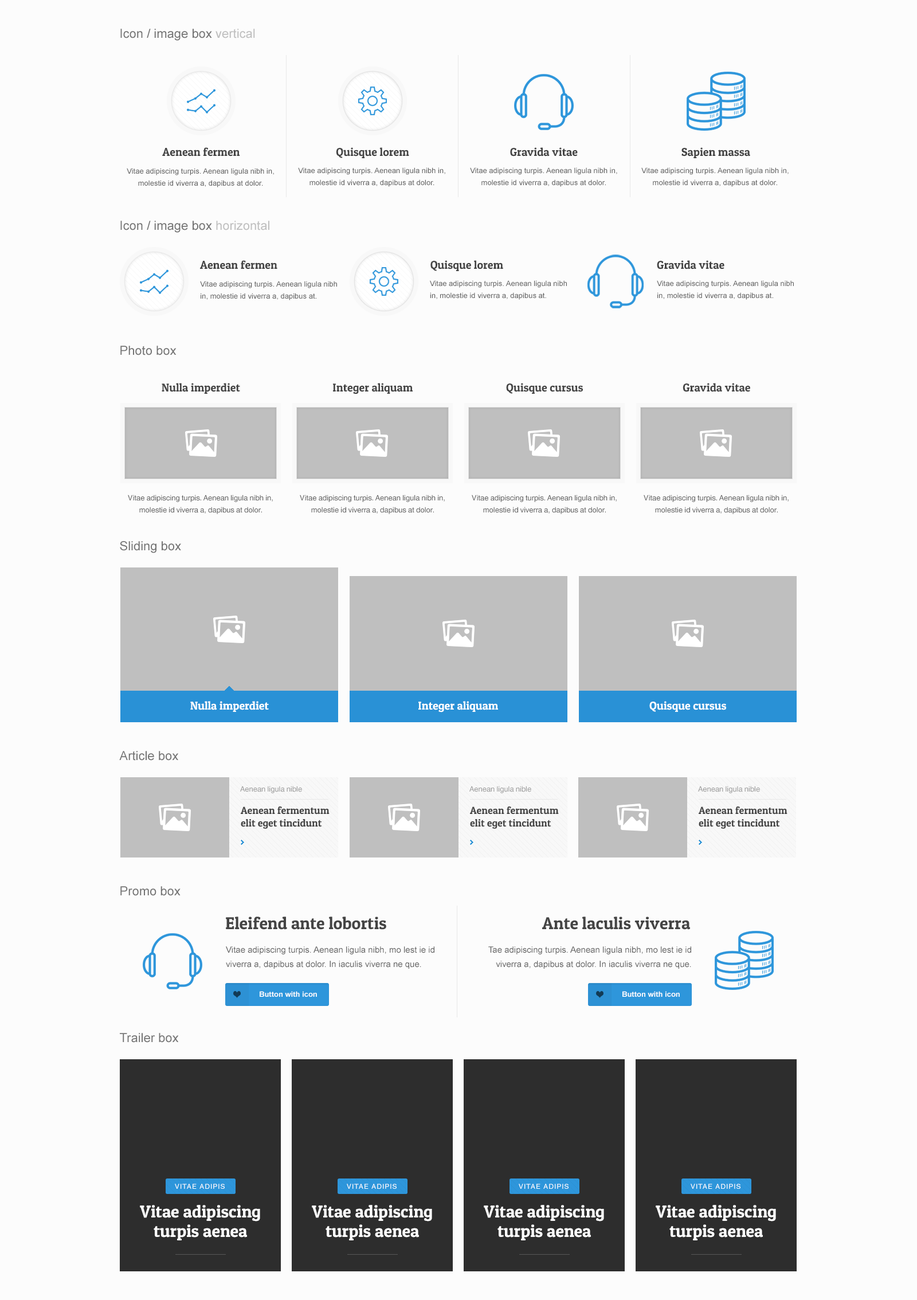
<style>
.page{position:relative;width:917px;height:1300px;background:#fcfcfc}
.page>*{position:absolute;margin:0}
.t1{font:12.6px "ArialMT";color:#737373}
.t2{font:12.6px "ArialMT";color:#bfbfbf}
.t3{font:11.5px "PatuaOne-Regular";color:#444444}
.t4{font:7.5px/12px "ArialMT";color:#626262}
.t5{font:7.4px/12px "ArialMT";color:#626262}
.t6{font:7.5px/12px "HelveticaWorld-Regular";color:#626262}
.t7{font:11.5px "PatuaOne-Regular";color:#ffffff}
.t8{font:7.5px "HelveticaWorld-Regular";color:#9e9e9e}
.t9{font:10.3px "PatuaOne-Regular";color:#444444}
.t10{font:17.2px "PatuaOne-Regular";color:#444444}
.t11{font:8.6px/14.3px "ArialMT";color:#626262}
.t12{font:7.5px "Arial-BoldMT";color:#ffffff}
.t13{font:7.4px "Arial-BoldMT";color:#ffffff}
.t14{font:6.9px "HelveticaWorld-Regular";letter-spacing:0.1em;color:#ffffff;text-transform:uppercase}
.t15{font:17.2px/19.5px "PatuaOne-Regular";color:#ffffff}
</style>
<div class="page">
<p class="t1" style="left:120px;top:29px;width:135px;height:12px">Icon / image box <span class="t2">vertical</span></p>
<p class="t3" style="left:162px;top:147px;width:78px;height:9px">Aenean fermen</p>
<p class="t3" style="left:336px;top:147px;width:73px;height:11px">Quisque lorem</p>
<p class="t3" style="left:510px;top:147px;width:68px;height:9px">Gravida vitae</p>
<p class="t3" style="left:682px;top:147px;width:68px;height:11px">Sapien massa</p>
<p class="t4" style="left:127px;top:168px;width:147px;height:19px;text-align:center">Vitae adipiscing turpis. Aenean ligula nibh in, molestie id viverra a, dapibus at dolor.</p>
<p class="t4" style="left:298px;top:167px;width:147px;height:20px;text-align:center">Vitae adipiscing turpis. Aenean ligula nibh in, molestie id viverra a, dapibus at dolor.</p>
<p class="t5" style="left:470px;top:167px;width:147px;height:20px;text-align:center">Vitae adipiscing turpis. Aenean ligula nibh in, molestie id viverra a, dapibus at dolor.</p>
<p class="t5" style="left:641px;top:167px;width:148px;height:20px;text-align:center">Vitae adipiscing turpis. Aenean ligula nibh in, molestie id viverra a, dapibus at dolor.</p>
<p class="t1" style="left:120px;top:221px;width:149px;height:12px">Icon / image box <span class="t2">horizontal</span></p>
<p class="t3" style="left:200px;top:260px;width:77px;height:9px">Aenean fermen</p>
<p class="t3" style="left:431px;top:260px;width:72px;height:11px">Quisque lorem</p>
<p class="t3" style="left:657px;top:260px;width:68px;height:9px">Gravida vitae</p>
<p class="t4" style="left:200px;top:281px;width:137px;height:19px">Vitae adipiscing turpis. Aenean ligula nibh in, molestie id viverra a, dapibus at.</p>
<p class="t5" style="left:430px;top:280px;width:137px;height:20px">Vitae adipiscing turpis. Aenean ligula nibh in, molestie id viverra a, dapibus at.</p>
<p class="t5" style="left:657px;top:280px;width:137px;height:20px">Vitae adipiscing turpis. Aenean ligula nibh in, molestie id viverra a, dapibus at.</p>
<p class="t1" style="left:120px;top:346px;width:57px;height:9px">Photo box</p>
<p class="t3" style="left:162px;top:383px;width:78px;height:11px">Nulla imperdiet</p>
<p class="t3" style="left:333px;top:383px;width:80px;height:11px">Integer aliquam</p>
<p class="t3" style="left:506px;top:383px;width:77px;height:11px">Quisque cursus</p>
<p class="t3" style="left:683px;top:383px;width:67px;height:9px">Gravida vitae</p>
<p class="t6" style="left:128px;top:495px;width:145px;height:19px;text-align:center">Vitae adipiscing turpis. Aenean ligula nibh in, molestie id viverra a, dapibus at dolor.</p>
<p class="t6" style="left:300px;top:495px;width:145px;height:19px;text-align:center">Vitae adipiscing turpis. Aenean ligula nibh in, molestie id viverra a, dapibus at dolor.</p>
<p class="t6" style="left:472px;top:495px;width:145px;height:19px;text-align:center">Vitae adipiscing turpis. Aenean ligula nibh in, molestie id viverra a, dapibus at dolor.</p>
<p class="t6" style="left:644px;top:495px;width:145px;height:19px;text-align:center">Vitae adipiscing turpis. Aenean ligula nibh in, molestie id viverra a, dapibus at dolor.</p>
<p class="t1" style="left:120px;top:541px;width:61px;height:12px">Sliding box</p>
<p class="t7" style="left:190px;top:701px;width:79px;height:11px">Nulla imperdiet</p>
<p class="t7" style="left:418px;top:701px;width:80px;height:12px">Integer aliquam</p>
<p class="t7" style="left:649px;top:701px;width:77px;height:11px">Quisque cursus</p>
<p class="t1" style="left:119px;top:751px;width:59px;height:10px">Article box</p>
<p class="t8" style="left:240px;top:786px;width:62px;height:7px">Aenean ligula nible</p>
<p class="t8" style="left:469px;top:786px;width:62px;height:7px">Aenean ligula nible</p>
<p class="t8" style="left:698px;top:786px;width:62px;height:7px">Aenean ligula nible</p>
<p class="t9" style="left:241px;top:807px;width:89px;height:22px">Aenean fermentum<br>elit eget tincidunt</p>
<p class="t9" style="left:470px;top:807px;width:89px;height:22px">Aenean fermentum<br>elit eget tincidunt</p>
<p class="t9" style="left:699px;top:807px;width:89px;height:22px">Aenean fermentum<br>elit eget tincidunt</p>
<p class="t1" style="left:120px;top:886px;width:61px;height:10px">Promo box</p>
<p class="t10" style="left:226px;top:917px;width:160px;height:13px">Eleifend ante lobortis</p>
<p class="t10" style="left:542px;top:917px;width:148px;height:13px">Ante laculis viverra</p>
<p class="t11" style="left:226px;top:946px;width:209px;height:23px">Vitae adipiscing turpis. Aenean ligula nibh, mo lest ie id viverra a, dapibus at dolor. In iaculis viverra ne que.</p>
<p class="t11" style="left:488px;top:946px;width:203px;height:23px;text-align:right">Tae adipiscing turpis. Aenean ligula nibh, mo lest ie id viverra a, dapibus at dolor. In iaculis viverra ne que.</p>
<p class="t12" style="left:260px;top:991px;width:57px;height:6px">Button with icon</p>
<p class="t13" style="left:623px;top:991px;width:57px;height:6px">Button with icon</p>
<p class="t1" style="left:120px;top:1033px;width:59px;height:10px">Trailer box</p>
<p class="t14" style="left:175px;top:1184px;width:50px;height:5px">Vitae adipis</p>
<p class="t14" style="left:347px;top:1184px;width:50px;height:5px">Vitae adipis</p>
<p class="t14" style="left:519px;top:1184px;width:50px;height:5px">Vitae adipis</p>
<p class="t14" style="left:691px;top:1184px;width:50px;height:5px">Vitae adipis</p>
<p class="t15" style="left:140px;top:1205px;width:120px;height:35px;text-align:center">Vitae adipiscing turpis aenea</p>
<p class="t15" style="left:312px;top:1205px;width:120px;height:35px;text-align:center">Vitae adipiscing turpis aenea</p>
<p class="t15" style="left:484px;top:1205px;width:120px;height:35px;text-align:center">Vitae adipiscing turpis aenea</p>
<p class="t15" style="left:656px;top:1205px;width:120px;height:35px;text-align:center">Vitae adipiscing turpis aenea</p>
</div>
